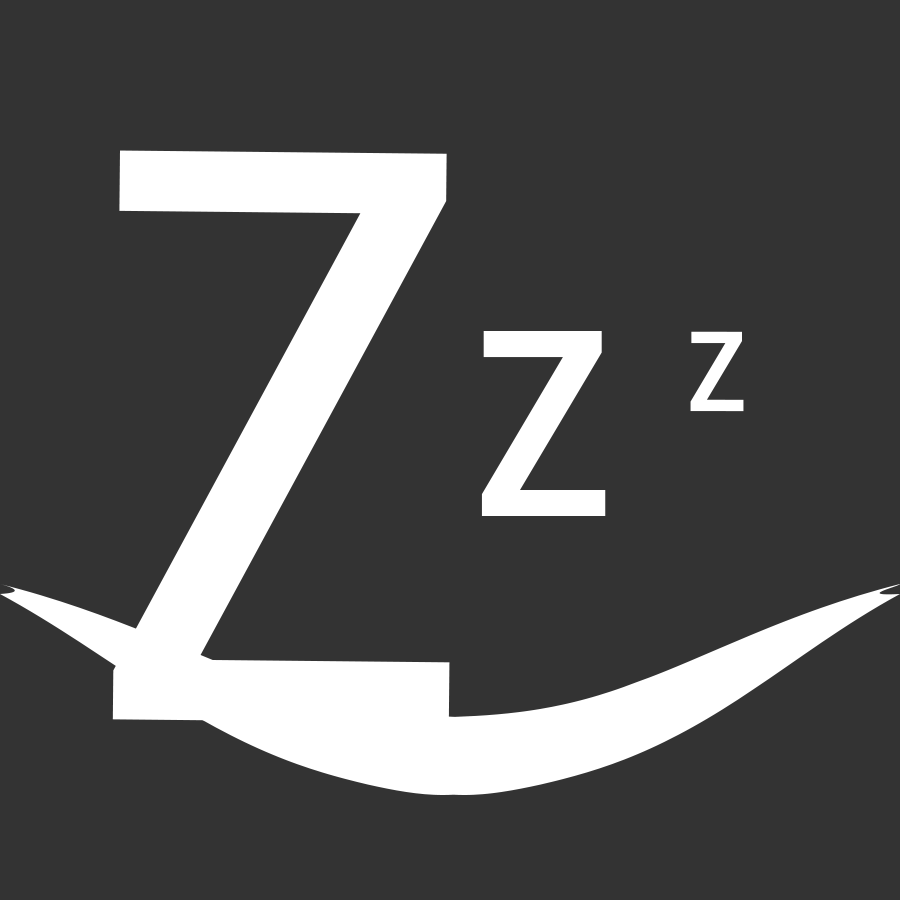
<style>
.page{position:relative;width:900px;height:900px;background:#333333}
.page>*{position:absolute;margin:0}
.t1{font:800px "RobotoCondensed-Regular";letter-spacing:0.13em;color:#ffffff}
.t2{font:350px "RobotoCondensed-Regular";letter-spacing:0.13em;color:#ffffff}
.t3{font:150px "RobotoCondensed-Regular";letter-spacing:0.13em;color:#ffffff}
</style>
<div class="page">
<p class="t1" style="left:112px;top:150px;width:338px;height:573px;rotate:1deg">Z</p>
<p class="t2" style="left:481px;top:331px;width:125px;height:185px">z</p>
<p class="t3" style="left:690px;top:331px;width:54px;height:81px">z</p>
</div>
